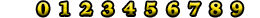
<style>
.page{position:relative;width:260px;height:18px;background:#ffffff}
.page>*{position:absolute;margin:0}
.t1{font:18px "IowanOldStyle-Black";letter-spacing:0.54em}
</style>
<div class="page">
<p class="t1" style="left:37px;top:2px;width:206px;height:14px">0123456789</p>
</div>
